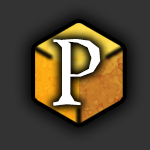
<style>
.page{position:relative;width:150px;height:150px;background:#333333}
.page>*{position:absolute;margin:0}
.t1{font:102.4px "Berylium-Regular";color:#ffffff}
</style>
<div class="page">
<p class="t1" style="left:53px;top:39px;width:48px;height:67px">P</p>
</div>
